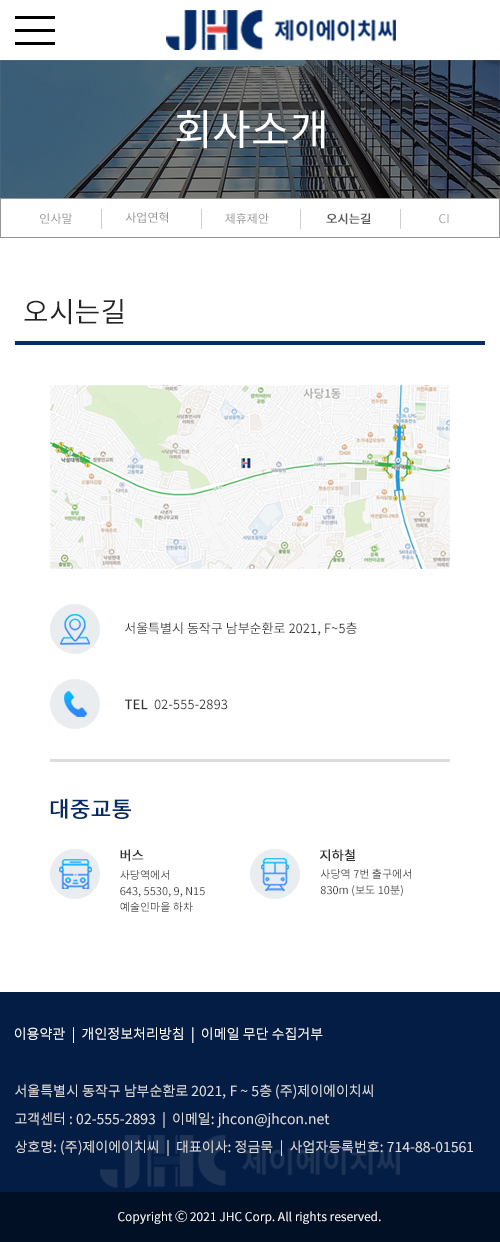
<style>
.page{position:relative;width:500px;height:1242px;background:#ffffff}
.page>*{position:absolute;margin:0}
.t1{font:42px "NotoSansKR-Regular";color:#ffffff}
.t2{font:12px "NotoSansKR-Regular";color:#959595}
.t3{font:12px "NotoSansKR-Regular";color:#595959;font-weight:bold}
.t4{font:28px "NotoSansKR-Regular";color:#242424}
.t5{font:13px "NotoSansKR-Regular";color:#333333}
.t6{font:13px "NotoSansKR-Regular";color:#333333;font-weight:bold}
.t7{font:22px "NotoSansKR-Regular";color:#052c69;font-weight:bold}
.t8{font:11px/16px "NotoSansKR-Regular";color:#333333}
.t9{font:14px "NotoSansKR-Regular";color:#ffffff}
.t10{font:14px/28px "NotoSansKR-Regular";color:#dddddd}
.t11{font:12px "NotoSansKR-Regular";color:#ffffff}
</style>
<div class="page">
<p class="t1" style="left:176px;top:110px;width:149px;height:39px">회사소개</p>
<p class="t2" style="left:40px;top:213px;width:32px;height:11px">인사말</p>
<p class="t2" style="left:125px;top:212px;width:43px;height:11px">사업연혁</p>
<p class="t2" style="left:225px;top:213px;width:44px;height:11px">제휴제안</p>
<p class="t3" style="left:326px;top:213px;width:45px;height:12px">오시는길</p>
<p class="t2" style="left:439px;top:214px;width:10px;height:10px">CI</p>
<p class="t4" style="left:24px;top:299px;width:100px;height:26px">오시는길</p>
<p class="t5" style="left:125px;top:622px;width:232px;height:14px">서울특별시 동작구 남부순환로 2021, F~5층</p>
<p class="t5" style="left:125px;top:699px;width:103px;height:11px"><span class="t6">TEL </span> 02-555-2893</p>
<p class="t7" style="left:50px;top:798px;width:81px;height:21px">대중교통</p>
<p class="t6" style="left:120px;top:849px;width:24px;height:13px">버스</p>
<p class="t6" style="left:320px;top:849px;width:35px;height:12px">지하철</p>
<p class="t8" style="left:120px;top:870px;width:85px;height:42px">사당역에서 <br>643, 5530, 9, N15<br>예술인마을 하차</p>
<p class="t8" style="left:320px;top:868px;width:91px;height:29px">사당역 7번 출구에서<br>830m (보도 10분)</p>
<p class="t9" style="left:15px;top:1027px;width:308px;height:16px">이용약관  |  개인정보처리방침  |  이메일 무단 수집거부</p>
<p class="t10" style="left:15px;top:1084px;width:458px;height:72px">서울특별시 동작구 남부순환로 2021, F ~ 5층 (주)제이에이치씨<br>고객센터 : 02-555-2893  |  이메일: jhcon@jhcon.net<br>상호명: (주)제이에이치씨  |  대표이사: 정금묵  |  사업자등록번호: 714-88-01561</p>
<p class="t11" style="left:118px;top:1210px;width:263px;height:14px">Copyright Ⓒ 2021 JHC Corp. All rights reserved.</p>
</div>
